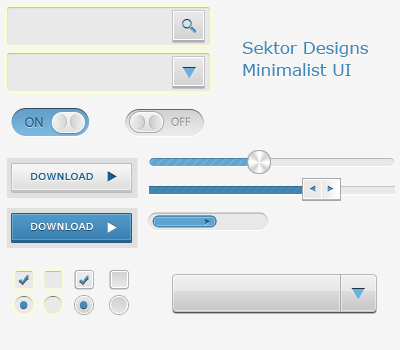
<style>
.page{position:relative;width:400px;height:350px;background:#f5f5f5}
.page>*{position:absolute;margin:0}
.t1{font:16.7px "Verdana";color:#4288b8}
.t2{font:14px "MyriadPro-Regular";color:#1b4b6d}
.t3{font:12px "MyriadPro-Regular";color:#9e9e9e}
.t4{font:10.4px "Verdana";color:#1c5d89}
.t5{font:10.4px "Verdana";color:#ffffff}
</style>
<div class="page">
<p class="t1" style="left:243px;top:41px;width:125px;height:16px">Sektor Designs</p>
<p class="t1" style="left:243px;top:63px;width:108px;height:13px">Minimalist UI</p>
<p class="t2" style="left:25px;top:117px;width:18px;height:10px">ON</p>
<p class="t3" style="left:171px;top:117px;width:20px;height:9px">OFF</p>
<p class="t4" style="left:31px;top:173px;width:62px;height:7px">DOWNLOAD</p>
<p class="t5" style="left:31px;top:223px;width:62px;height:7px">DOWNLOAD</p>
</div>
